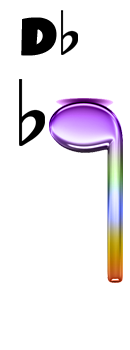
<style>
.page{position:relative;width:130px;height:350px;background:#ffffff}
.page>*{position:absolute;margin:0}
.t1{font:54px "LuckiestGuy-Regular";letter-spacing:0.005em;color:#000000;font-weight:bold;scale:1.11 1}
</style>
<div class="page">
<p class="t1" style="left:21px;top:17px;width:36px;height:39px">D</p>
</div>
